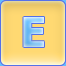
<style>
.page{position:relative;width:66px;height:66px}
.page>*{position:absolute;margin:0}
.t1{font:41px "Tahoma-Bold"}
</style>
<div class="page">
<p class="t1" style="left:23px;top:17px;width:21px;height:30px">Е</p>
<p class="t1" style="left:23px;top:17px;width:21px;height:30px">Е</p>
</div>
